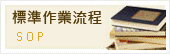
<style>
.page{position:relative;width:170px;height:54px;background:#f6f0e0}
.page>*{position:absolute;margin:0}
.t1{font:15.1px "MicrosoftJhengHeiBold";color:#533c09}
.t2{font:12.8px "FranklinGothic-Book";color:#e0ab27}
</style>
<div class="page">
<p class="t1" style="left:12px;top:10px;width:90px;height:14px">標準作業流程</p>
<p class="t2" style="left:17px;top:32px;width:26px;height:9px">S O P</p>
</div>
